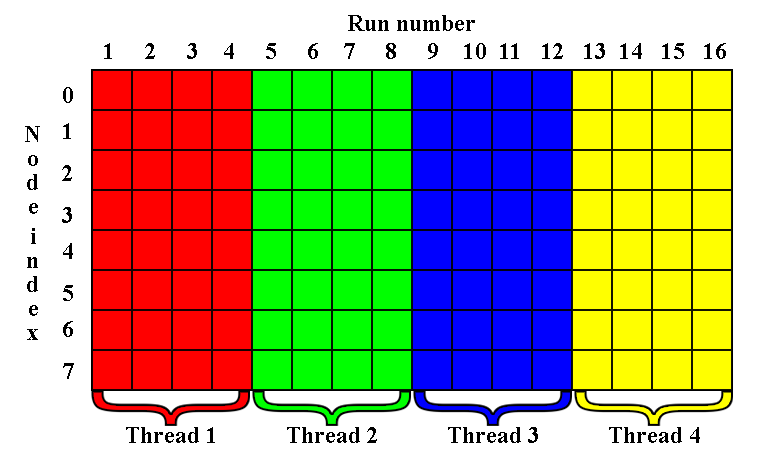
<style>
.page{position:relative;width:781px;height:455px;background:#ffffff}
.page>*{position:absolute;margin:0}
.t1{font:24px "TimesNewRomanPS-BoldMT";color:#000000}
.t2{font:24px/30px "TimesNewRomanPS-BoldMT";color:#000000}
</style>
<div class="page">
<p class="t1" style="left:348px;top:15px;width:127px;height:16px">Run number</p>
<p class="t1" style="left:104px;top:43px;width:622px;height:16px">1  2   3   4    5     6    7     8 9    10 11  12   13  14   15   16</p>
<p class="t2" style="left:62px;top:87px;width:12px;height:292px">0  1   2   3  4   5  6   7</p>
<p class="t2" style="left:25px;top:126px;width:15px;height:214px">Node index</p>
<p class="t1" style="left:126px;top:427px;width:89px;height:16px">Thread 1</p>
<p class="t1" style="left:287px;top:427px;width:90px;height:16px">Thread 2</p>
<p class="t1" style="left:448px;top:427px;width:90px;height:16px">Thread 3</p>
<p class="t1" style="left:609px;top:427px;width:91px;height:16px">Thread 4</p>
</div>
